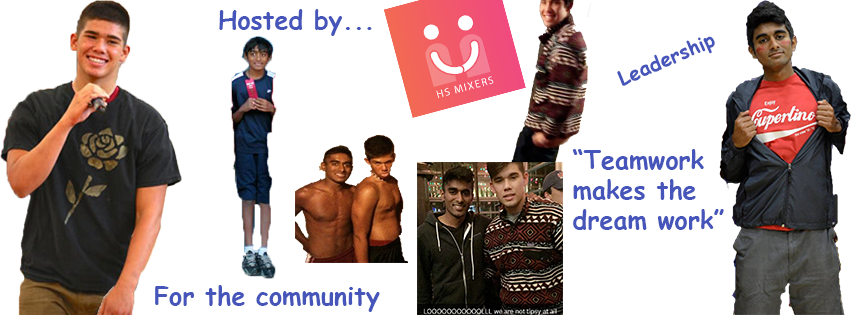
<style>
.page{position:relative;width:851px;height:315px;background:#ffffff}
.page>*{position:absolute;margin:0}
.t1{font:25px "ComicSansMS-Bold";color:#4555b9}
.t2{font:20px "ComicSansMS-Bold";color:#4555b9}
</style>
<div class="page">
<p class="t1" style="left:219px;top:9px;width:153px;height:27px">Hosted by...</p>
<p class="t2" style="left:617px;top:36px;width:98px;height:50px;rotate:-23deg">Leadership</p>
<p class="t1" style="left:572px;top:149px;width:152px;height:81px">“Teamwork<br>makes the<br>dream work”</p>
<p class="t1" style="left:155px;top:285px;width:225px;height:27px">For the community</p>
</div>
